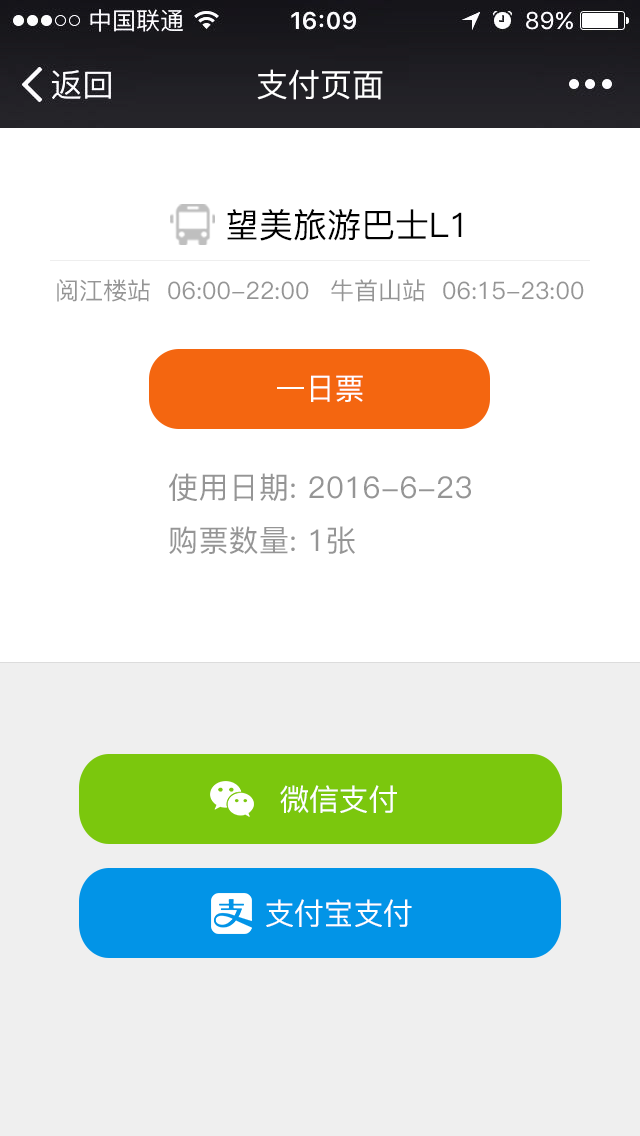
<style>
.page{position:relative;width:640px;height:1136px;background:#ffffff}
.page>*{position:absolute;margin:0}
.t1{font:32px "PingFang-SC-Medium";color:#ffffff}
.t2{font:34px "PingFang-SC-Medium";color:#000000}
.t3{font:24px "PingFang-SC-Medium";color:#959595}
.t4{font:30px "PingFang-SC-Medium";letter-spacing:-0.01em;color:#ffffff}
.t5{font:30px "PingFang-SC-Medium";letter-spacing:0.01em;color:#959595}
</style>
<div class="page">
<p class="t1" style="left:257px;top:69px;width:126px;height:31px">支付页面</p>
<p class="t2" style="left:227px;top:209px;width:235px;height:32px">望美旅游巴士L1</p>
<p class="t3" style="left:57px;top:279px;width:252px;height:23px">阅江楼站  06:00-22:00</p>
<p class="t3" style="left:331px;top:279px;width:253px;height:23px">牛首山站  06:15-23:00</p>
<p class="t4" style="left:277px;top:375px;width:86px;height:27px">一日票</p>
<p class="t5" style="left:169px;top:473px;width:302px;height:29px">使用日期: 2016-6-23</p>
<p class="t5" style="left:169px;top:526px;width:186px;height:28px">购票数量: 1张</p>
<p class="t4" style="left:280px;top:785px;width:117px;height:28px">微信支付</p>
<p class="t4" style="left:266px;top:899px;width:146px;height:28px">支付宝支付</p>
</div>
